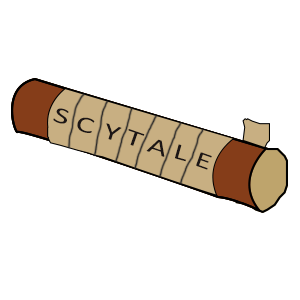
<style>
.page{position:relative;width:300px;height:300px;background:#ffffff}
.page>*{position:absolute;margin:0}
.t1{font:22.9px "Calibri";color:#1c1616;scale:1.5 1}
.t2{font:22.9px "Calibri";color:#1c1616;scale:1.54 1}
.t3{font:22.9px "Calibri";color:#1c1616;scale:1.48 1}
</style>
<div class="page">
<p class="t1" style="left:53px;top:108px;width:16px;height:16px;rotate:18deg">S</p>
<p class="t1" style="left:77px;top:117px;width:18px;height:16px;rotate:15deg">C</p>
<p class="t1" style="left:106px;top:123px;width:16px;height:17px;rotate:17deg">Y</p>
<p class="t2" style="left:128px;top:129px;width:17px;height:17px;rotate:19deg">T</p>
<p class="t1" style="left:146px;top:139px;width:19px;height:18px;rotate:19deg">A</p>
<p class="t1" style="left:175px;top:144px;width:11px;height:18px;rotate:16deg">L</p>
<p class="t3" style="left:196px;top:152px;width:16px;height:18px;rotate:20deg">E</p>
</div>
